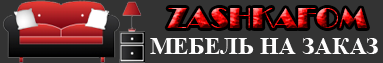
<style>
.page{position:relative;width:383px;height:63px;background:#333333}
.page>*{position:absolute;margin:0}
.t1{font:30px "Broadway"}
.t2{font:24px "TimesNewRomanPS-BoldMT";color:#fefdfd}
</style>
<div class="page">
<p class="t1" style="left:167px;top:8px;width:200px;height:20px">ZASHKAFOM</p>
<p class="t2" style="left:150px;top:38px;width:228px;height:16px">МЕБЕЛЬ НА ЗАКАЗ</p>
</div>
